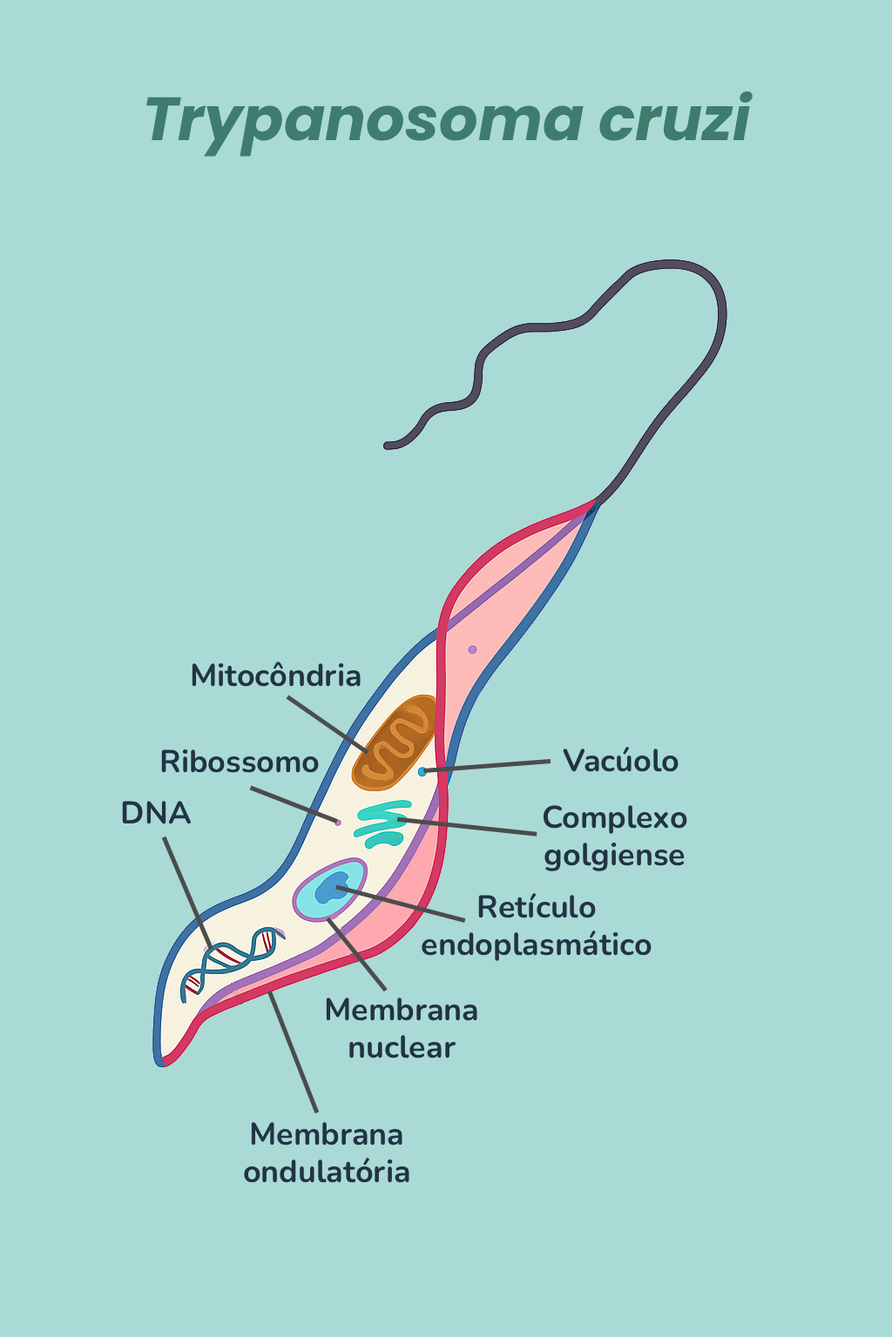
<style>
.page{position:relative;width:892px;height:1337px;background:#aadad6}
.page>*{position:absolute;margin:0}
.t1{font:60.9px "Poppins-BoldItalic";color:#3e7c6d}
.t2{font:31.3px "Nunito-Bold";color:#223344}
</style>
<div class="page">
<p class="t1" style="left:146px;top:91px;width:607px;height:66px">Trypanosoma cruzi</p>
<p class="t2" style="left:192px;top:662px;width:168px;height:25px">Mitocôndria</p>
<p class="t2" style="left:161px;top:750px;width:158px;height:23px">Ribossomo</p>
<p class="t2" style="left:562px;top:746px;width:116px;height:26px">Vacúolo</p>
<p class="t2" style="left:122px;top:801px;width:70px;height:24px">DNA</p>
<p class="t2" style="left:542px;top:805px;width:145px;height:67px;text-align:center">Complexo golgiense</p>
<p class="t2" style="left:421px;top:893px;width:230px;height:68px;text-align:center">Retículo endoplasmático</p>
<p class="t2" style="left:326px;top:998px;width:151px;height:61px;text-align:center">Membrana nuclear</p>
<p class="t2" style="left:244px;top:1122px;width:165px;height:61px;text-align:center">Membrana ondulatória</p>
</div>
